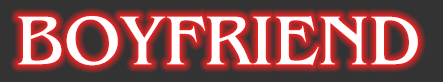
<style>
.page{position:relative;width:443px;height:82px;background:#333333}
.page>*{position:absolute;margin:0}
.t1{font:72px "Baldessare";color:#ffffff}
</style>
<div class="page">
<p class="t1" style="left:18px;top:16px;width:400px;height:50px">BOYFRIEND</p>
</div>
